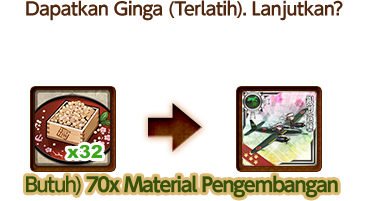
<style>
.page{position:relative;width:368px;height:201px;background:#ffffff}
.page>*{position:absolute;margin:0}
.t1{font:18px "UDShinGoPro-DeBold";letter-spacing:-0.04em;color:#50260d}
.t2{font:20px "UDShinGoPro-Bold";letter-spacing:-0.08em;color:#375309}
.t3{font:20px "UDShinGoPro-DeBold";letter-spacing:-0.08em;color:#375309}
</style>
<div class="page">
<p class="t1" style="left:26px;top:0px;width:317px;height:21px">Dapatkan Ginga (Terlatih). Lanjutkan?</p>
<p class="t2" style="left:26px;top:175px;width:312px;height:23px"><span class="t3">Butuh) </span>70x Material Pengembangan</p>
</div>
